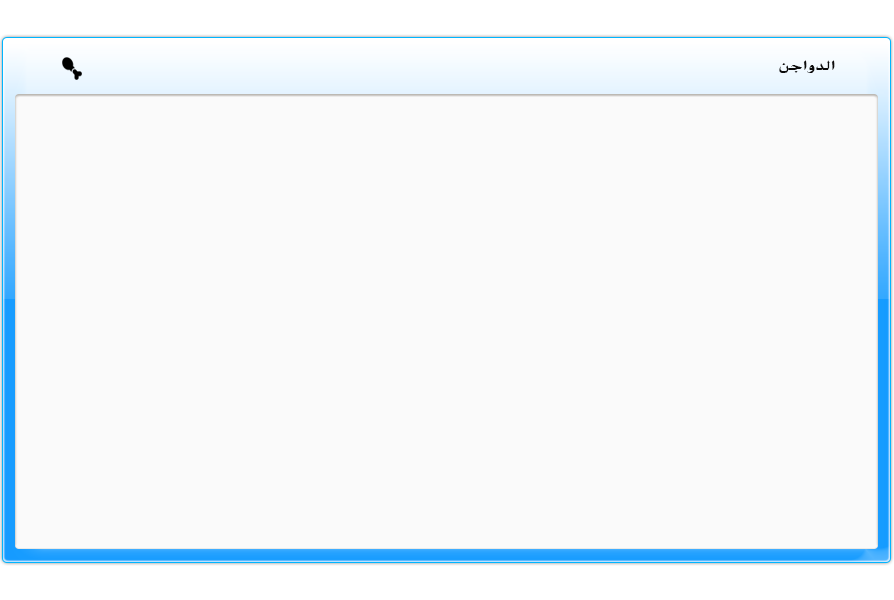
<style>
.page{position:relative;width:894px;height:600px;background:#fafafa}
.page>*{position:absolute;margin:0}
.t1{font:14.9px "BoutrosAdsMedium";color:#0c0b0b;scale:1.13 1}
</style>
<div class="page">
<p class="t1" style="left:779px;top:60px;width:56px;height:13px">الدواجن</p>
</div>
